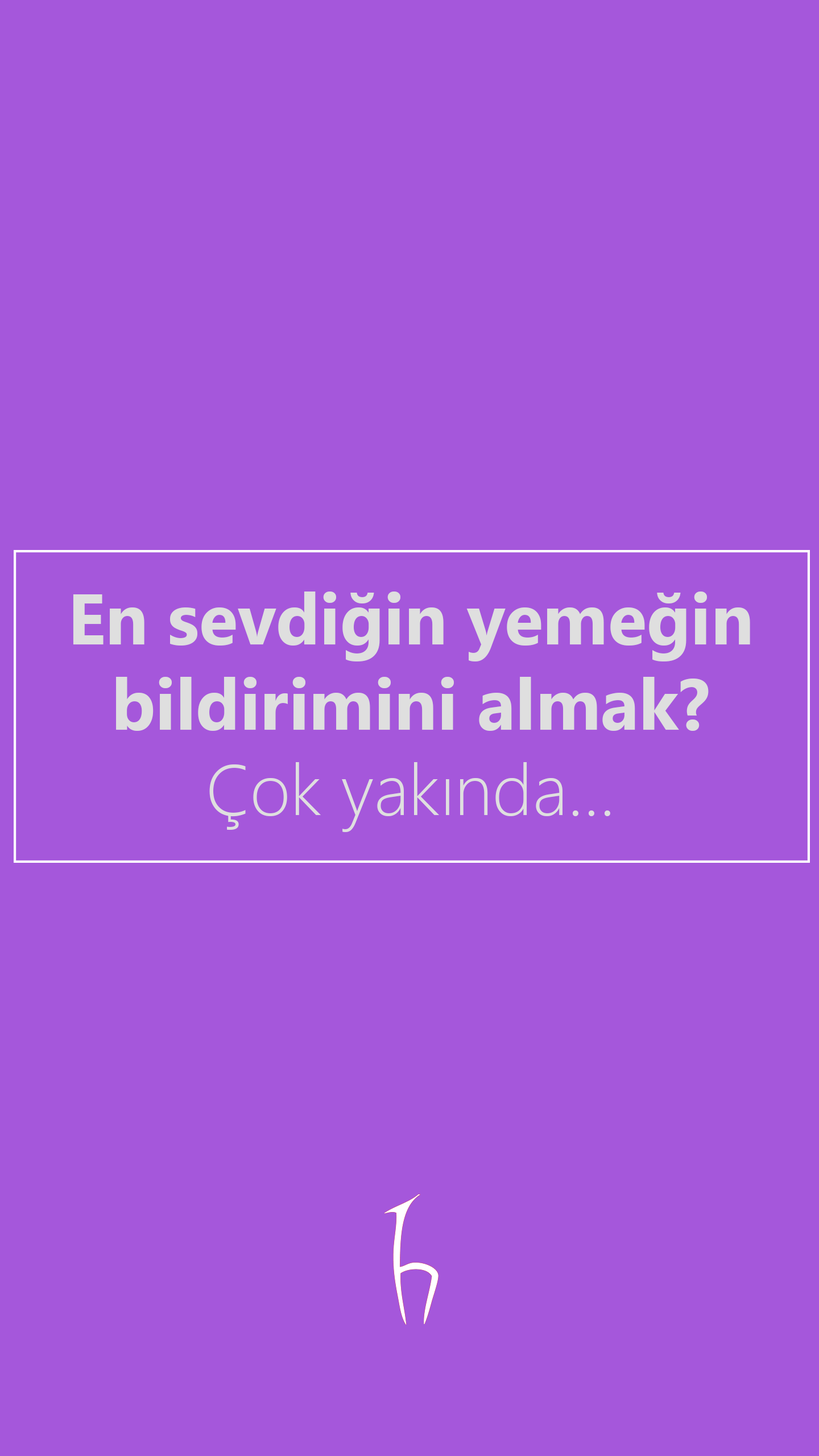
<style>
.page{position:relative;width:819px;height:1456px;background:#a557db}
.page>*{position:absolute;margin:0}
.t1{font:71.1px "SegoeUI-Bold";color:#dfdfdf}
.t2{font:71.1px "SegoeUI-Light";color:#dfdfdf}
</style>
<div class="page">
<p class="t1" style="left:73px;top:591px;width:677px;height:241px;text-align:center">En sevdiğin yemeğin<br>bildirimini almak?<br><span class="t2">Çok yakında...</span></p>
</div>
